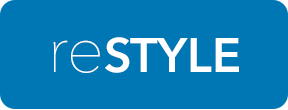
<style>
.page{position:relative;width:288px;height:110px;background:#0077b5}
.page>*{position:absolute;margin:0}
.t1{font:48px "AvenirNext-DemiBold";color:#ffffff}
.t2{font:66px "AvenirNext-UltraLight";color:#ffffff}
</style>
<div class="page">
<p class="t1" style="left:53px;top:37px;width:186px;height:36px"><span class="t2">re</span>STYLE</p>
</div>
